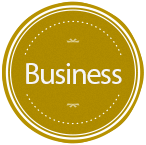
<style>
.page{position:relative;width:146px;height:145px;background:#ffffff}
.page>*{position:absolute;margin:0}
.t1{font:30px "MyriadPro-Regular";letter-spacing:-0.04em;color:#f5f5f5}
</style>
<div class="page">
<p class="t1" style="left:26px;top:63px;width:96px;height:21px">Business</p>
</div>
